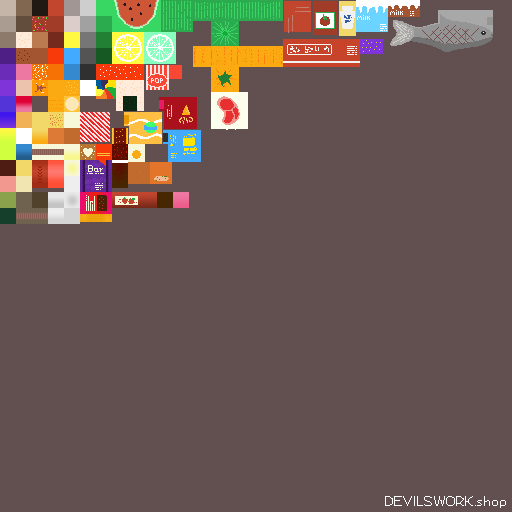
<style>
.page{position:relative;width:512px;height:512px;background:#625050}
.page>*{position:absolute;margin:0}
.t1{font:10px "FFFHarmony";color:#ffffff}
</style>
<div class="page">
<p class="t1" style="left:385px;top:496px;width:121px;height:12px">DEVILSWORK.shop</p>
</div>
